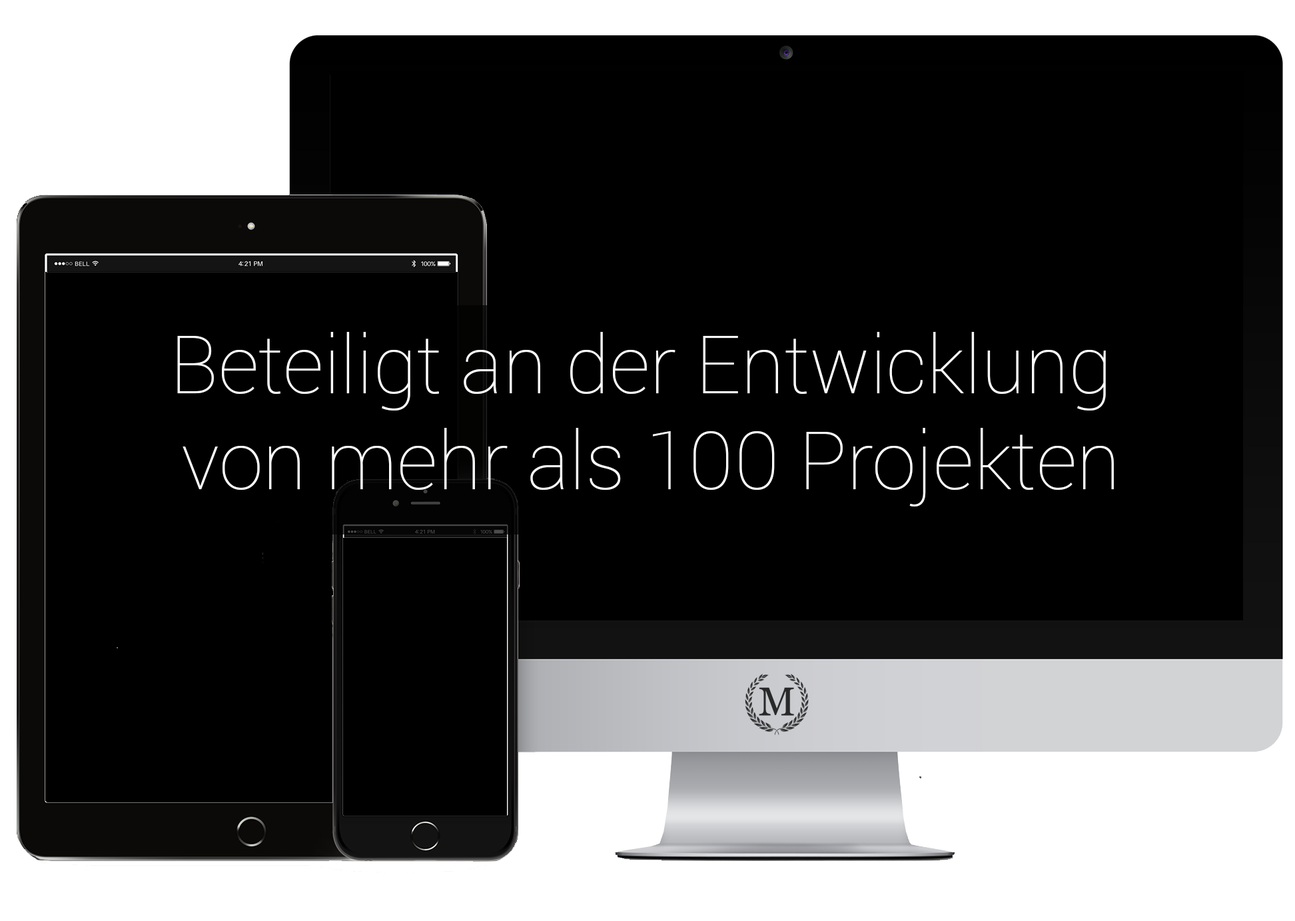
<style>
.page{position:relative;width:1295px;height:921px;background:#000000}
.page>*{position:absolute;margin:0}
.t1{font:79.9px "Roboto-Thin";color:#fdfdfd}
</style>
<div class="page">
<p class="t1" style="left:177px;top:332px;width:937px;height:174px;text-align:center">Beteiligt an der Entwicklung <br>von mehr als 100 Projekten</p>
</div>
